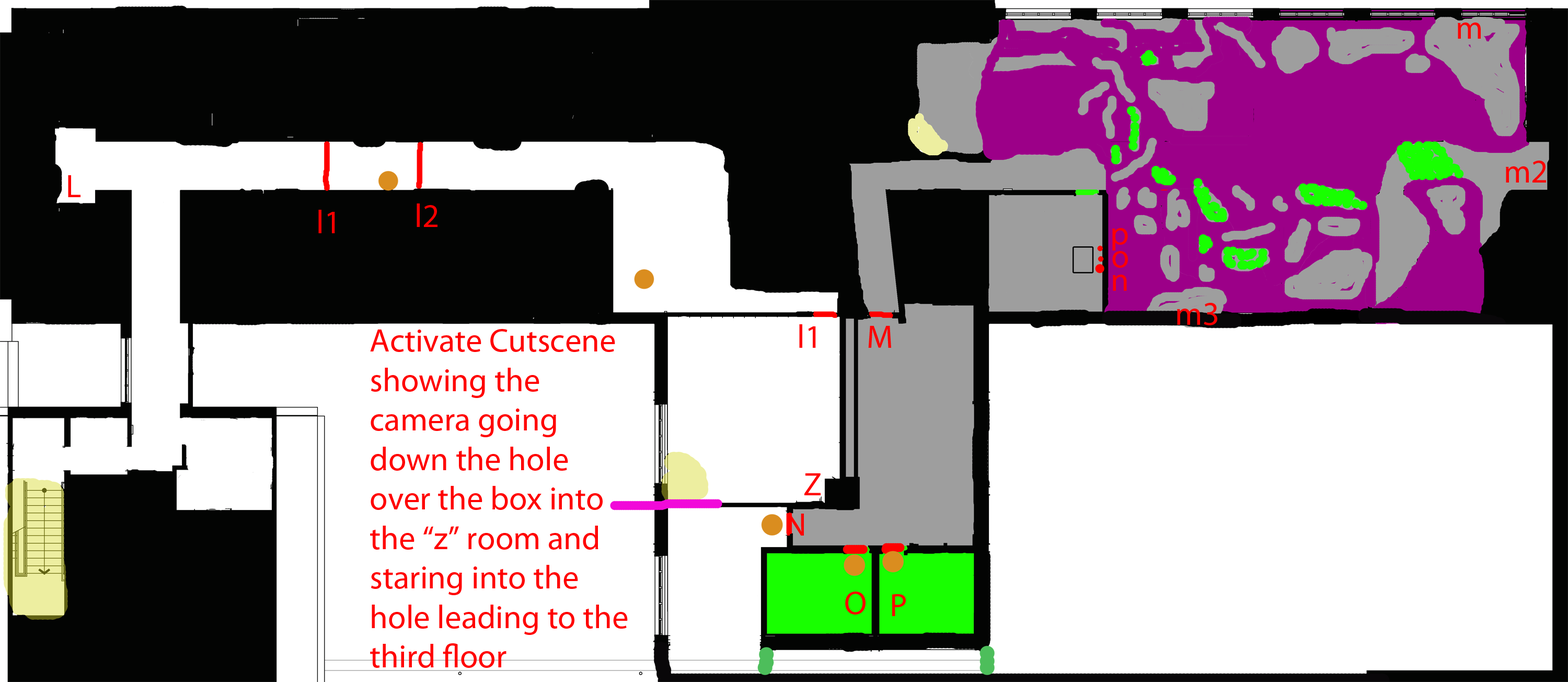
<style>
.page{position:relative;width:1568px;height:682px;background:#ffffff}
.page>*{position:absolute;margin:0}
.t1{font:32.9px "MyriadPro-Regular";color:#ff0000}
</style>
<div class="page">
<p class="t1" style="left:1458px;top:22px;width:23px;height:17px">m</p>
<p class="t1" style="left:1506px;top:160px;width:40px;height:22px">m2</p>
<p class="t1" style="left:68px;top:175px;width:12px;height:22px">L</p>
<p class="t1" style="left:318px;top:210px;width:17px;height:23px">l1</p>
<p class="t1" style="left:417px;top:203px;width:20px;height:24px">l2</p>
<p class="t1" style="left:1112px;top:228px;width:16px;height:22px">p</p>
<p class="t1" style="left:1112px;top:251px;width:16px;height:17px">o</p>
<p class="t1" style="left:1113px;top:274px;width:14px;height:17px">n</p>
<p class="t1" style="left:1177px;top:303px;width:40px;height:22px">m3</p>
<p class="t1" style="left:370px;top:329px;width:258px;height:338px">Activate Cutscene showing the camera going down the hole over the box into the “z” room and staring into the hole leading to the third floor</p>
<p class="t1" style="left:799px;top:324px;width:17px;height:24px">l1</p>
<p class="t1" style="left:868px;top:326px;width:23px;height:22px">M</p>
<p class="t1" style="left:804px;top:473px;width:17px;height:22px">Z</p>
<p class="t1" style="left:787px;top:513px;width:17px;height:22px">N</p>
<p class="t1" style="left:845px;top:591px;width:21px;height:23px">O</p>
<p class="t1" style="left:892px;top:594px;width:14px;height:22px">P</p>
</div>
